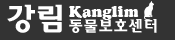
<style>
.page{position:relative;width:175px;height:40px;background:#333333}
.page>*{position:absolute;margin:0}
.t1{font:30px "HaanSomangB";color:#ffffff}
.t2{font:15px "Cooper-BlkBT";color:#ffffff}
.t3{font:15px "HaanSomangB";color:#ffffff}
</style>
<div class="page">
<p class="t1" style="left:7px;top:4px;width:55px;height:29px">강림</p>
<p class="t2" style="left:69px;top:6px;width:70px;height:14px">Kanglim</p>
<p class="t3" style="left:69px;top:19px;width:88px;height:14px">동물보호센터</p>
</div>
